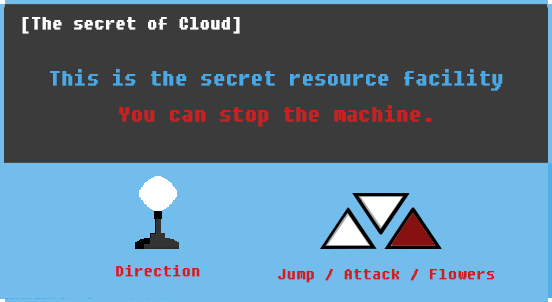
<style>
.page{position:relative;width:552px;height:302px;background:#3b3b3b}
.page>*{position:absolute;margin:0}
.t1{font:20px "DungGeunMo";color:#fffefe;font-weight:bold}
.t2{font:24px/36px "DungGeunMo";color:#49a9e6;font-weight:bold}
.t3{font:24px/36px "DungGeunMo";color:#cd1f1f;font-weight:bold}
.t4{font:18px "DungGeunMo";color:#cd1f1f;font-weight:bold}
</style>
<div class="page">
<p class="t1" style="left:22px;top:17px;width:218px;height:17px">[The secret of Cloud]</p>
<p class="t2" style="left:50px;top:69px;width:453px;height:58px;text-align:center">This is the secret resource facility<br><span class="t3">You can stop the machine.</span></p>
<p class="t4" style="left:116px;top:265px;width:84px;height:12px">Direction</p>
<p class="t4" style="left:278px;top:269px;width:217px;height:14px">Jump / Attack / Flowers</p>
</div>
